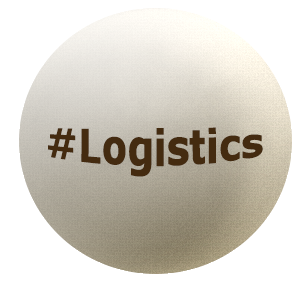
<style>
.page{position:relative;width:306px;height:290px;background:#ffffff}
.page>*{position:absolute;margin:0}
.t1{font:37.5px "Verdana-Bold";color:#442b10}
</style>
<div class="page">
<p class="t1" style="left:48px;top:127px;width:215px;height:50px">#Logistics</p>
</div>
